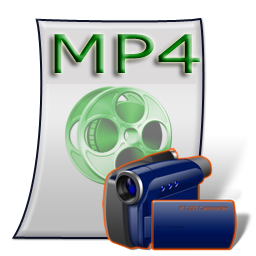
<style>
.page{position:relative;width:256px;height:256px;background:#ffffff}
.page>*{position:absolute;margin:0}
.t1{font:53.3px "Verdana";scale:1.41 1}
</style>
<div class="page">
<p class="t1" style="left:54px;top:34px;width:146px;height:39px">MP4</p>
</div>
